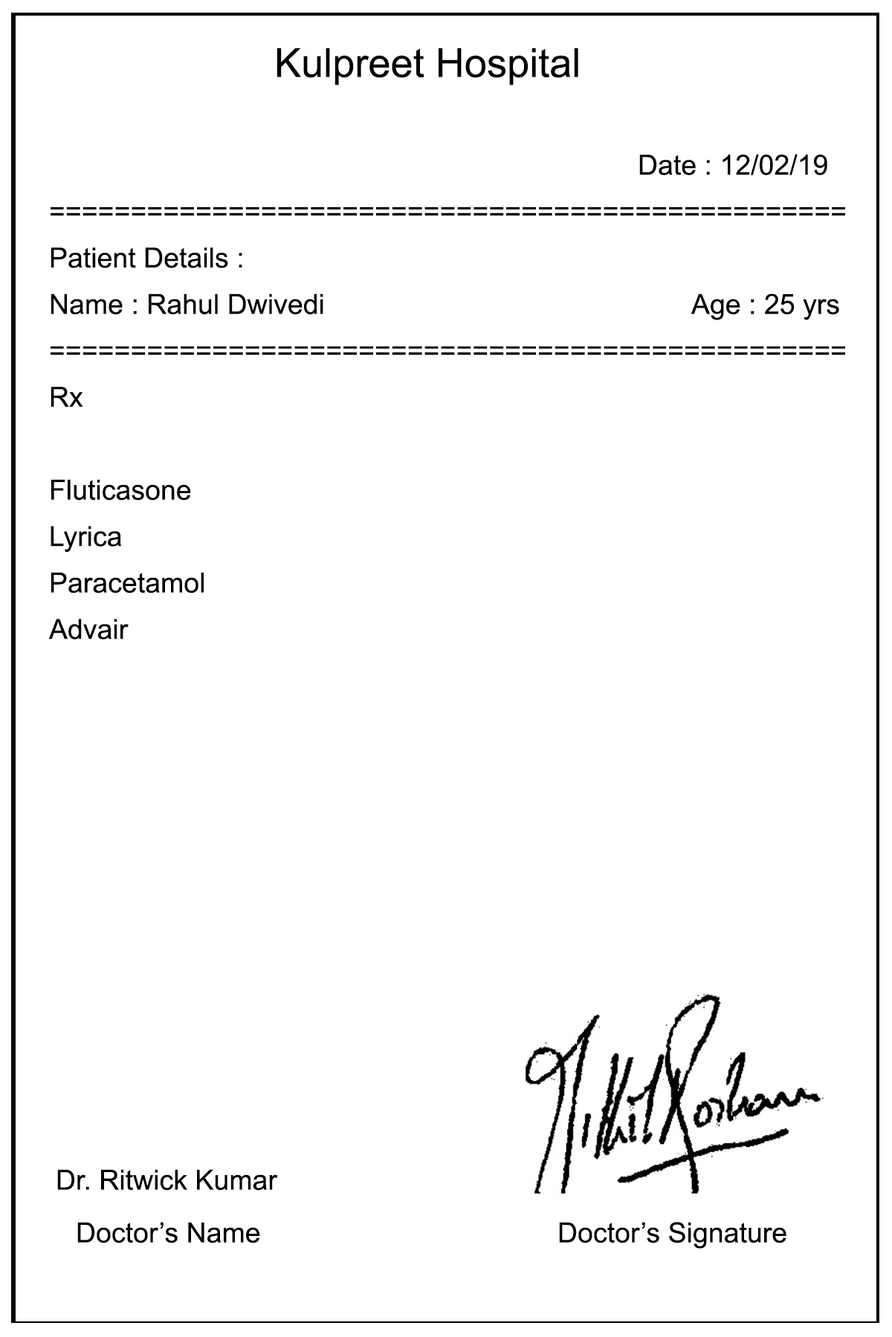
<style>
.page{position:relative;width:892px;height:1337px;background:#ffffff}
.page>*{position:absolute;margin:0}
.t1{font:40.2px "ArialMT";color:#000000}
.t2{font:27.9px/46.4px "ArialMT";color:#000000}
.t3{font:27.9px "ArialMT";color:#000000}
</style>
<div class="page">
<p class="t1" style="left:276px;top:48px;width:302px;height:37px">Kulpreet Hospital</p>
<p class="t2" style="left:48px;top:154px;width:797px;height:1095px">Date : 12/02/19<br>=================================================<br>Patient Details :<br>Name : Rahul Dwivedi              Age : 25 yrs<br>=================================================<br>Rx<br><br>Fluticasone<br>Lyrica<br>Paracetamol<br>Advair<br><br><br><br><br><br><br><br><br><br><br><br>       <br> Doctor’s Name            Doctor’s Signature</p>
<p class="t3" style="left:57px;top:1169px;width:221px;height:22px">Dr. Ritwick Kumar</p>
</div>
